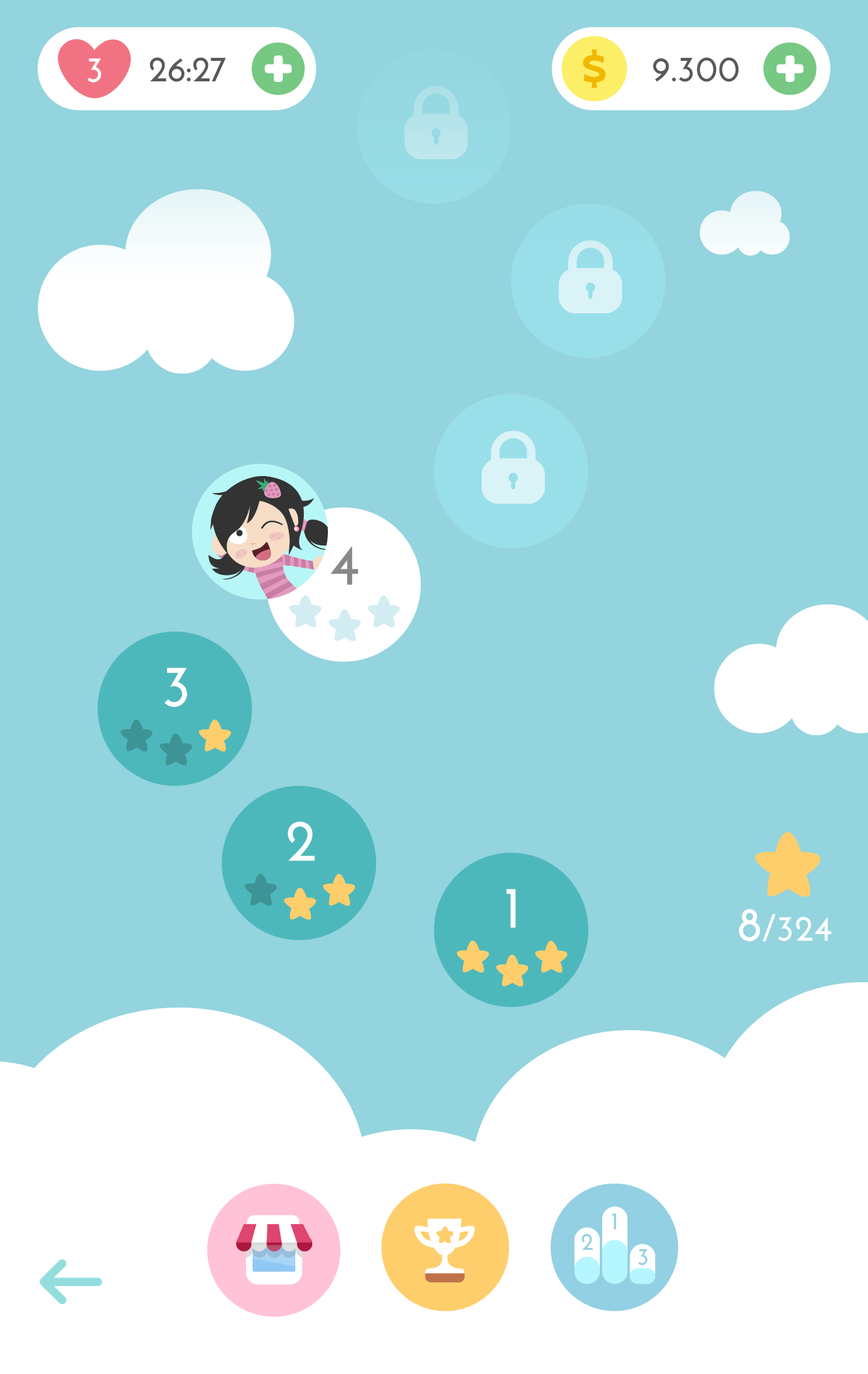
<style>
.page{position:relative;width:868px;height:1374px;background:#93d4de}
.page>*{position:absolute;margin:0}
.t1{font:36.2px "JosefinSans-Bold";color:#ffffff}
.t2{font:36.2px "JosefinSans-Bold";color:#595959}
.t3{font:59.2px "JosefinSans-Bold";color:#888888}
.t4{font:59.2px "JosefinSans-Bold";color:#ffffff}
.t5{font:48.2px "JosefinSans-Bold";color:#ffffff}
</style>
<div class="page">
<p class="t1" style="left:87px;top:58px;width:14px;height:25px">3</p>
<p class="t2" style="left:149px;top:57px;width:77px;height:25px">26:27</p>
<p class="t2" style="left:653px;top:57px;width:86px;height:25px">9.300</p>
<p class="t3" style="left:330px;top:545px;width:28px;height:40px">4</p>
<p class="t4" style="left:165px;top:668px;width:22px;height:39px">3</p>
<p class="t4" style="left:287px;top:821px;width:28px;height:40px">2</p>
<p class="t4" style="left:506px;top:889px;width:10px;height:39px">1</p>
<p class="t1" style="left:739px;top:909px;width:92px;height:33px"><span class="t5">8</span>/324</p>
</div>
